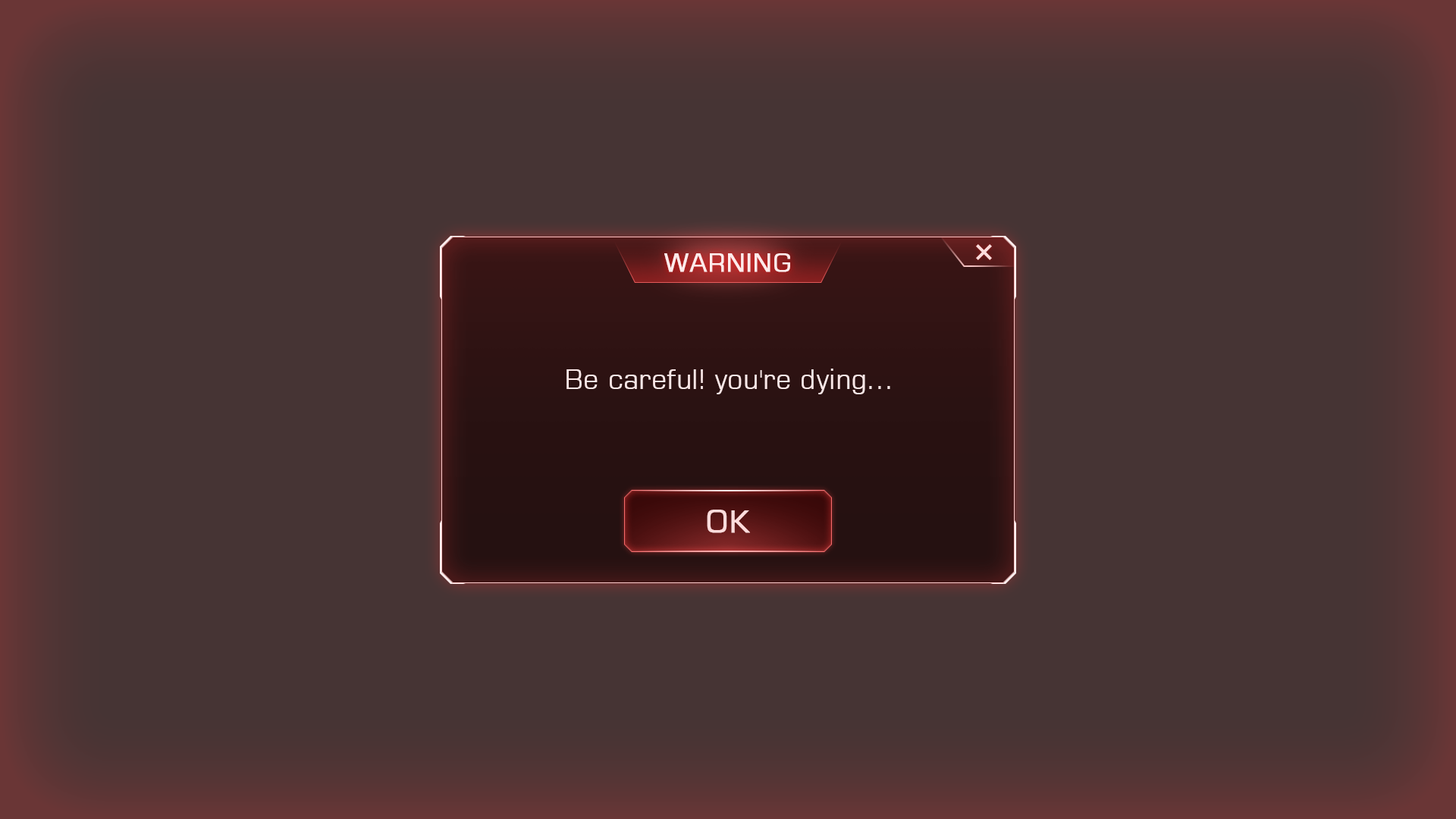
<style>
.page{position:relative;width:1456px;height:819px;background:#463434}
.page>*{position:absolute;margin:0}
.t1{font:25px "Square721BT-Roman";color:#ffebeb;font-weight:bold}
.t2{font:27.3px "Square721BT-Roman";color:#fbe7e7}
.t3{font:30.3px "Square721BT-Roman";color:#ffdcdc;font-weight:bold}
</style>
<div class="page">
<p class="t1" style="left:664px;top:253px;width:126px;height:19px">WARNING</p>
<p class="t2" style="left:566px;top:369px;width:324px;height:25px">Be careful! you're dying...</p>
<p class="t3" style="left:707px;top:510px;width:43px;height:23px">OK</p>
</div>
